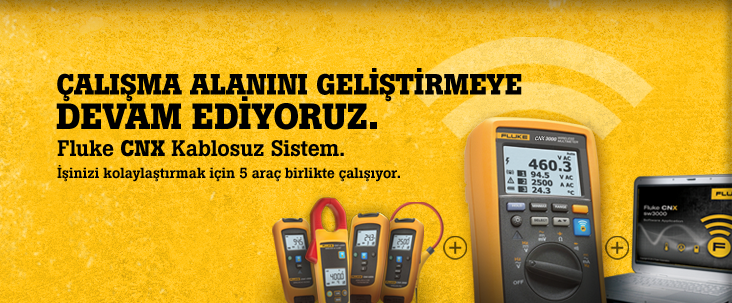
<style>
.page{position:relative;width:732px;height:303px}
.page>*{position:absolute;margin:0}
.t1{font:29px "BotonPro-Bold";letter-spacing:-0.005em;color:#000000;text-transform:uppercase}
.t2{font:36px "BotonPro-Bold";letter-spacing:-0.005em;color:#000000;text-transform:uppercase}
.t3{font:14.5px "BotonPro-Medium";letter-spacing:-0.01em;color:#000000}
.t4{font:22.4px "BotonPro-Medium";letter-spacing:-0.01em;color:#000000}
.t5{font:22.4px "BotonPro-Bold";letter-spacing:-0.01em;color:#000000}
</style>
<div class="page">
<p class="t1" style="left:57px;top:68px;width:465px;height:34px">Çalışma alanını GELİŞTİRMEYE</p>
<p class="t2" style="left:56px;top:96px;width:321px;height:34px">devam EDİYORUZ.</p>
<p class="t3" style="left:57px;top:140px;width:343px;height:42px"><span class="t4">Fluke </span><span class="t5">CNX</span><span class="t4"> Kablosuz Sistem.<br></span>İşinizi kolaylaştırmak için 5 araç birlikte çalışıyor.</p>
</div>
